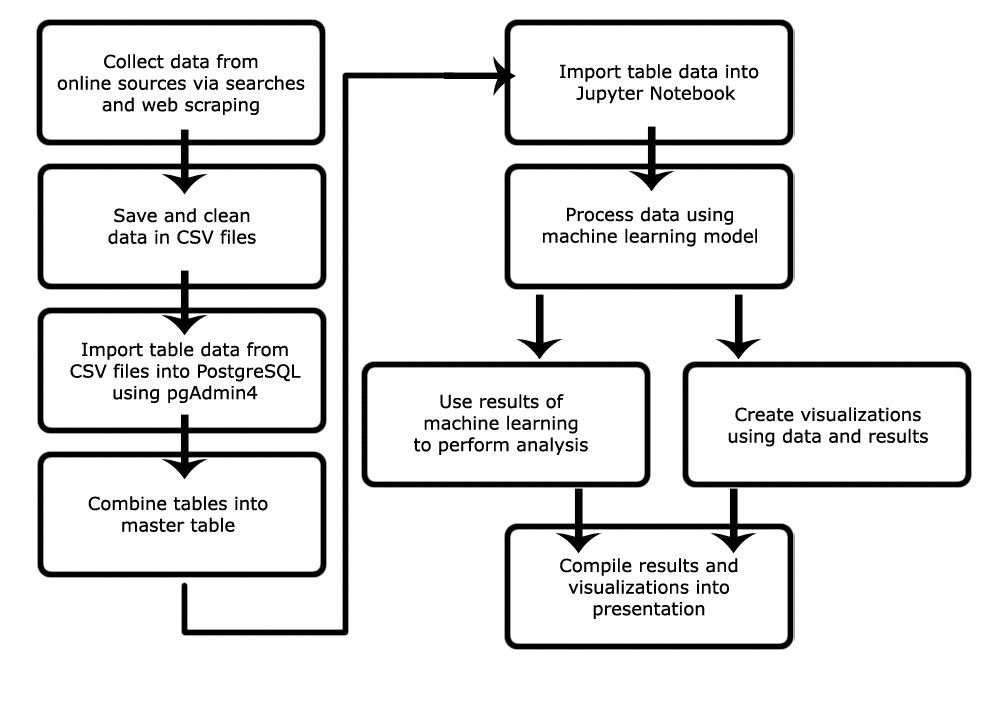
<style>
.page{position:relative;width:1008px;height:720px;background:#ffffff}
.page>*{position:absolute;margin:0}
.t1{font:18px "Verdana";color:#000000}
</style>
<div class="page">
<p class="t1" style="left:57px;top:54px;width:248px;height:61px;text-align:center">Collect data from<br>online sources via searches<br>and web scraping</p>
<p class="t1" style="left:560px;top:64px;width:199px;height:40px;text-align:center">Import table data into<br>Jupyter Notebook</p>
<p class="t1" style="left:108px;top:208px;width:148px;height:36px;text-align:center">Save and clean<br>data in CSV files</p>
<p class="t1" style="left:543px;top:207px;width:214px;height:40px;text-align:center">Process data using<br>machine learning model</p>
<p class="t1" style="left:70px;top:342px;width:231px;height:61px;text-align:center">Import table data from<br>CSV files into PostgreSQL<br>using pgAdmin4</p>
<p class="t1" style="left:414px;top:394px;width:174px;height:61px;text-align:center">Use results of<br>machine learning<br>to perform analysis</p>
<p class="t1" style="left:728px;top:407px;width:200px;height:40px;text-align:center">Create visualizations<br>using data and results</p>
<p class="t1" style="left:88px;top:496px;width:180px;height:36px;text-align:center">Combine tables into<br>master table</p>
<p class="t1" style="left:560px;top:558px;width:178px;height:61px;text-align:center">Compile results and<br>visualizations into<br>presentation</p>
</div>
